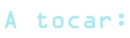
<style>
.page{position:relative;width:130px;height:38px;background:#ffffff}
.page>*{position:absolute;margin:0}
.t1{font:22px "OCRAStd";color:#a8e8ee}
</style>
<div class="page">
<p class="t1" style="left:5px;top:11px;width:119px;height:17px">A tocar:</p>
</div>
